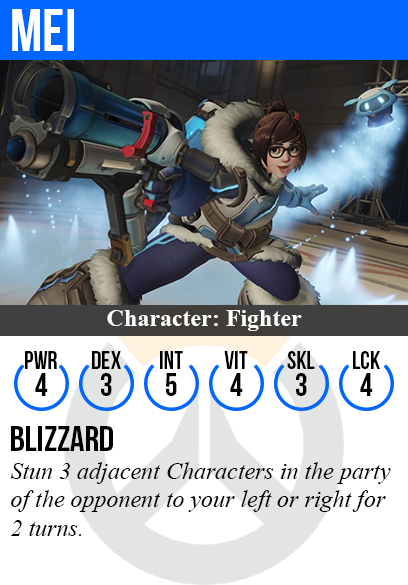
<style>
.page{position:relative;width:408px;height:585px;background:#ffffff}
.page>*{position:absolute;margin:0}
.t1{font:60px "BebasNeue";color:#ffffff}
.t2{font:24px "TimesNewRomanPS-BoldMT";color:#ffffff}
.t3{font:25px "BebasNeue";color:#000000}
.t4{font:32px "BebasNeue";color:#000000}
.t5{font:36px "BebasNeue";color:#000000}
.t6{font:24px "TimesNewRomanPS-ItalicMT";color:#000000}
</style>
<div class="page">
<p class="t1" style="left:12px;top:9px;width:62px;height:42px">mei</p>
<p class="t2" style="left:107px;top:310px;width:195px;height:21px">Character: Fighter</p>
<p class="t3" style="left:25px;top:351px;width:32px;height:18px">PWR</p>
<p class="t3" style="left:92px;top:351px;width:29px;height:18px">dex</p>
<p class="t3" style="left:160px;top:351px;width:23px;height:18px">int</p>
<p class="t3" style="left:224px;top:351px;width:24px;height:18px">vit</p>
<p class="t3" style="left:287px;top:351px;width:28px;height:18px">skl</p>
<p class="t3" style="left:353px;top:351px;width:27px;height:18px">lck</p>
<p class="t4" style="left:35px;top:373px;width:13px;height:23px">4</p>
<p class="t4" style="left:101px;top:373px;width:11px;height:23px">3</p>
<p class="t4" style="left:166px;top:373px;width:11px;height:23px">5</p>
<p class="t4" style="left:230px;top:373px;width:13px;height:23px">4</p>
<p class="t4" style="left:296px;top:373px;width:11px;height:23px">3</p>
<p class="t4" style="left:360px;top:373px;width:13px;height:23px">4</p>
<p class="t5" style="left:11px;top:426px;width:102px;height:25px">blizzard</p>
<p class="t6" style="left:10px;top:462px;width:381px;height:74px">Stun 3 adjacent Characters in the party<br>of the opponent to your left or right for<br>2 turns.</p>
</div>
